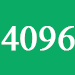
<style>
.page{position:relative;width:75px;height:75px;background:#09ab65}
.page>*{position:absolute;margin:0}
.t1{font:36px "TimesNewRomanPSMT";color:#ffffff;font-weight:bold}
</style>
<div class="page">
<p class="t1" style="left:1px;top:26px;width:74px;height:25px">4096</p>
</div>
